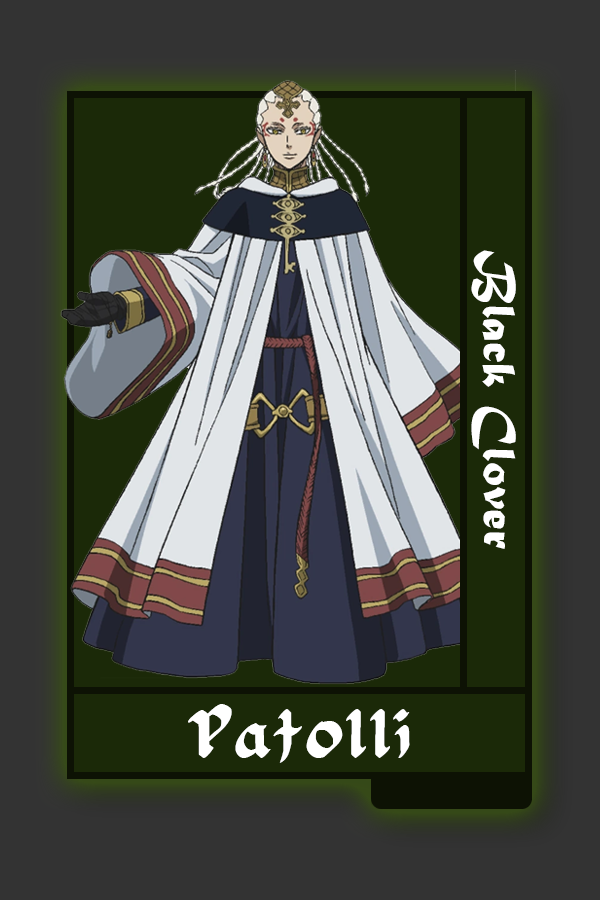
<style>
.page{position:relative;width:600px;height:900px;background:#333333}
.page>*{position:absolute;margin:0}
.t1{font:48.8px "MaturaMTScriptCapitals";color:#ffffff}
.t2{font:59.7px "FloranteatLaura";color:#ffffff}
</style>
<div class="page">
<p class="t1" style="left:471px;top:250px;width:45px;height:299px;rotate:90deg">Black Clover</p>
<p class="t2" style="left:188px;top:704px;width:222px;height:59px">Patolli</p>
</div>
